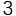
<style>
.page{position:relative;width:16px;height:16px;background:#ffffff}
.page>*{position:absolute;margin:0}
.t1{font:20px "DengXian";color:#000000}
</style>
<div class="page">
<p class="t1" style="left:3px;top:1px;width:10px;height:14px">3</p>
</div>
